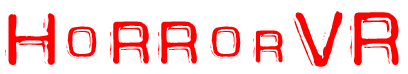
<style>
.page{position:relative;width:408px;height:74px;background:#ffffff}
.page>*{position:absolute;margin:0}
.t1{font:48px "Spacesuit";color:#ff0000}
.t2{font:60px "Spacesuit";color:#ff0000}
.t3{font:36px "Spacesuit";color:#ff0000}
</style>
<div class="page">
<p class="t1" style="left:5px;top:11px;width:394px;height:56px"><span class="t2">H</span>ORRO<span class="t3">R</span><span class="t2">VR</span></p>
</div>
